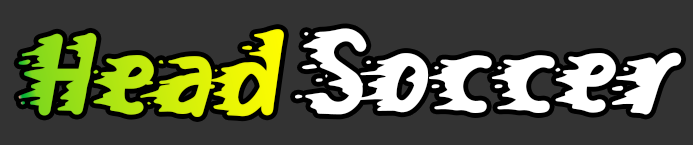
<style>
.page{position:relative;width:693px;height:145px;background:#333333}
.page>*{position:absolute;margin:0}
.t1{font:120px "OnFireFreeTrial"}
.t2{font:120px "OnFireFreeTrial";color:#ffffff}
</style>
<div class="page">
<p class="t1" style="left:18px;top:29px;width:266px;height:88px">Head</p>
<p class="t2" style="left:295px;top:28px;width:387px;height:87px">Soccer</p>
</div>
